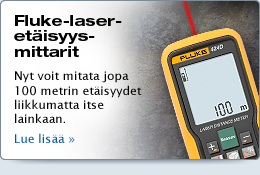
<style>
.page{position:relative;width:260px;height:175px}
.page>*{position:absolute;margin:0}
.t1{font:15px/15.5px "HelveticaNeueLTStd-BdEx";color:#000000}
.t2{font:12px "LucidaSans";color:#000000}
.t3{font:12px/14.4px "LucidaSans";color:#0058b3}
</style>
<div class="page">
<p class="t1" style="left:14px;top:15px;width:108px;height:42px">Fluke-laser-<br>etäisyys-<br>mittarit</p>
<p class="t2" style="left:15px;top:71px;width:127px;height:72px">Nyt voit mitata jopa 100 metrin etäisyydet liikkumatta itse lainkaan. <br><span class="t3">Lue lisää »</span></p>
</div>
